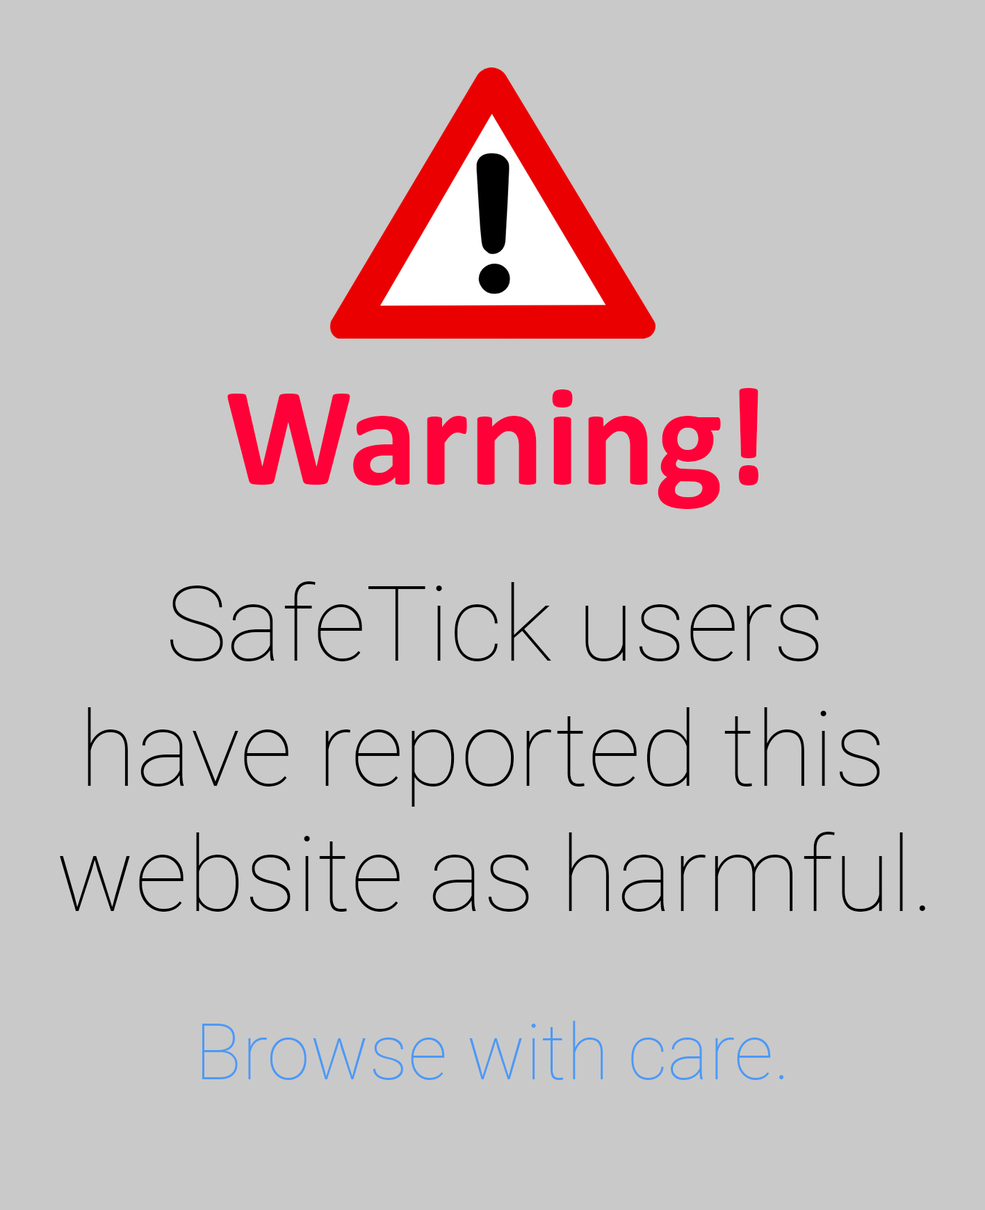
<style>
.page{position:relative;width:985px;height:1210px;background:#c9c9c9}
.page>*{position:absolute;margin:0}
.t1{font:142px "Calibri-Bold";color:#ff0038}
.t2{font:104.3px "Roboto-Thin";color:#000000}
.t3{font:78.2px "Roboto-Thin";color:#4c99f5}
</style>
<div class="page">
<p class="t1" style="left:227px;top:388px;width:532px;height:121px">Warning!</p>
<p class="t2" style="left:60px;top:581px;width:866px;height:331px;text-align:center">SafeTick users<br>have reported this <br>website as harmful.</p>
<p class="t3" style="left:202px;top:1021px;width:582px;height:59px">Browse with care.</p>
</div>
